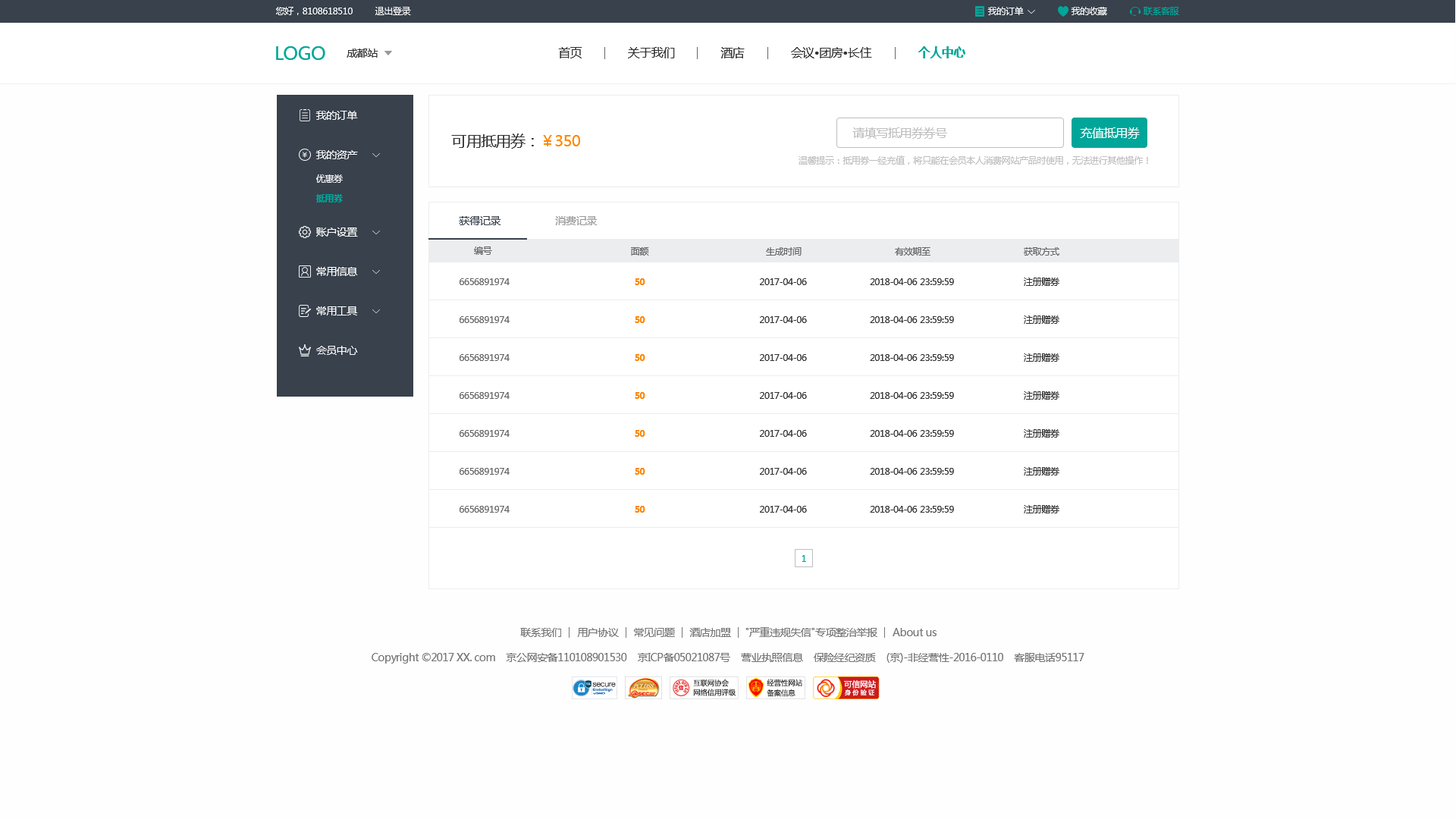
<style>
.page{position:relative;width:1456px;height:819px;background:#fefefe}
.page>*{position:absolute;margin:0}
.t1{font:9.1px "MicrosoftYaHei";letter-spacing:-0.03em;color:#ffffff}
.t2{font:9.1px "MicrosoftYaHei";letter-spacing:-0.03em;color:#00a699}
.t3{font:18.2px "MicrosoftYaHei";letter-spacing:-0.03em;color:#00a699}
.t4{font:10.6px "MicrosoftYaHei";letter-spacing:-0.03em;color:#333333}
.t5{font:12.1px "MicrosoftYaHei";letter-spacing:-0.03em;color:#333333}
.t6{font:12.1px "MicrosoftYaHei-Bold";letter-spacing:-0.03em;color:#00a699}
.t7{font:10.6px "MicrosoftYaHei";letter-spacing:-0.03em;color:#ffffff}
.t8{font:15.2px "MicrosoftYaHei";letter-spacing:-0.03em;color:#333333}
.t9{font:15.2px "MicrosoftYaHei";letter-spacing:-0.03em;color:#ff8800}
.t10{font:12.1px "MicrosoftYaHei";letter-spacing:-0.03em;color:#bfbfbf}
.t11{font:12.1px "MicrosoftYaHei";letter-spacing:-0.03em;color:#ffffff}
.t12{font:9.1px "MicrosoftYaHei";letter-spacing:-0.03em;color:#bfbfbf}
.t13{font:9.1px "MicrosoftYaHei-Bold";letter-spacing:-0.03em;color:#00a699}
.t14{font:10.6px "MicrosoftYaHei";letter-spacing:-0.03em;color:#38414c}
.t15{font:10.6px "MicrosoftYaHei";letter-spacing:-0.03em;color:#999999}
.t16{font:9.1px "MicrosoftYaHei";letter-spacing:-0.03em;color:#666666}
.t17{font:9.1px "MicrosoftYaHei-Bold";letter-spacing:-0.03em;color:#ff8800}
.t18{font:9.1px "MicrosoftYaHei";letter-spacing:-0.03em;color:#333333}
.t19{font:10.6px "MicrosoftYaHei";letter-spacing:-0.03em;color:#777777}
</style>
<div class="page">
<p class="t1" style="left:276px;top:7px;width:77px;height:8px">您好，8108618510</p>
<p class="t1" style="left:375px;top:7px;width:36px;height:8px">退出登录</p>
<p class="t1" style="left:987px;top:7px;width:37px;height:8px">我的订单</p>
<p class="t1" style="left:1071px;top:7px;width:36px;height:8px">我的收藏</p>
<p class="t2" style="left:1144px;top:7px;width:35px;height:8px">联系客服</p>
<p class="t3" style="left:276px;top:46px;width:49px;height:14px">LOGO</p>
<p class="t4" style="left:347px;top:49px;width:31px;height:9px">成都站</p>
<p class="t5" style="left:558px;top:47px;width:24px;height:11px">首页</p>
<p class="t5" style="left:628px;top:47px;width:47px;height:11px">关于我们</p>
<p class="t5" style="left:720px;top:47px;width:25px;height:11px">酒店</p>
<p class="t5" style="left:791px;top:47px;width:81px;height:11px">会议•团房•长住</p>
<p class="t6" style="left:918px;top:46px;width:47px;height:12px">个人中心</p>
<p class="t7" style="left:315px;top:111px;width:43px;height:9px">我的订单</p>
<p class="t8" style="left:451px;top:133px;width:129px;height:16px">可用抵用券：<span class="t9">￥350</span></p>
<p class="t10" style="left:852px;top:127px;width:95px;height:12px">请填写抵用券券号</p>
<p class="t11" style="left:1080px;top:127px;width:60px;height:12px">充值抵用券</p>
<p class="t7" style="left:315px;top:150px;width:43px;height:9px">我的资产</p>
<p class="t12" style="left:799px;top:155px;width:349px;height:10px">温馨提示：抵用券一经充值，将只能在会员本人消费网站产品时使用，无法进行其他操作！</p>
<p class="t1" style="left:316px;top:174px;width:27px;height:9px">优惠券</p>
<p class="t13" style="left:315px;top:194px;width:28px;height:8px">抵用券</p>
<p class="t14" style="left:459px;top:216px;width:42px;height:9px">获得记录</p>
<p class="t15" style="left:555px;top:216px;width:43px;height:9px">消费记录</p>
<p class="t7" style="left:316px;top:227px;width:42px;height:10px">账户设置</p>
<p class="t16" style="left:474px;top:246px;width:18px;height:9px">编号</p>
<p class="t16" style="left:631px;top:247px;width:18px;height:9px">面额</p>
<p class="t16" style="left:766px;top:247px;width:36px;height:9px">生成时间</p>
<p class="t16" style="left:895px;top:247px;width:35px;height:9px">有效期至</p>
<p class="t16" style="left:1024px;top:247px;width:35px;height:9px">获取方式</p>
<p class="t7" style="left:316px;top:267px;width:42px;height:9px">常用信息</p>
<p class="t16" style="left:460px;top:278px;width:50px;height:7px">6656891974</p>
<p class="t17" style="left:635px;top:278px;width:10px;height:7px">50</p>
<p class="t18" style="left:760px;top:278px;width:47px;height:7px">2017-04-06</p>
<p class="t18" style="left:870px;top:278px;width:84px;height:7px">2018-04-06 23:59:59</p>
<p class="t18" style="left:1024px;top:278px;width:35px;height:8px">注册赠券</p>
<p class="t7" style="left:316px;top:306px;width:42px;height:9px">常用工具</p>
<p class="t16" style="left:460px;top:316px;width:50px;height:7px">6656891974</p>
<p class="t17" style="left:635px;top:316px;width:10px;height:7px">50</p>
<p class="t18" style="left:760px;top:316px;width:47px;height:7px">2017-04-06</p>
<p class="t18" style="left:870px;top:316px;width:84px;height:7px">2018-04-06 23:59:59</p>
<p class="t18" style="left:1024px;top:315px;width:35px;height:9px">注册赠券</p>
<p class="t7" style="left:316px;top:346px;width:42px;height:9px">会员中心</p>
<p class="t18" style="left:1024px;top:353px;width:35px;height:9px">注册赠券</p>
<p class="t16" style="left:460px;top:354px;width:50px;height:7px">6656891974</p>
<p class="t17" style="left:635px;top:354px;width:10px;height:7px">50</p>
<p class="t18" style="left:760px;top:354px;width:47px;height:7px">2017-04-06</p>
<p class="t18" style="left:870px;top:354px;width:84px;height:7px">2018-04-06 23:59:59</p>
<p class="t16" style="left:460px;top:392px;width:50px;height:7px">6656891974</p>
<p class="t17" style="left:635px;top:392px;width:10px;height:7px">50</p>
<p class="t18" style="left:760px;top:392px;width:47px;height:7px">2017-04-06</p>
<p class="t18" style="left:870px;top:392px;width:84px;height:7px">2018-04-06 23:59:59</p>
<p class="t18" style="left:1024px;top:391px;width:35px;height:9px">注册赠券</p>
<p class="t16" style="left:460px;top:430px;width:50px;height:7px">6656891974</p>
<p class="t17" style="left:635px;top:430px;width:10px;height:7px">50</p>
<p class="t18" style="left:760px;top:430px;width:47px;height:7px">2017-04-06</p>
<p class="t18" style="left:870px;top:430px;width:84px;height:7px">2018-04-06 23:59:59</p>
<p class="t18" style="left:1024px;top:429px;width:35px;height:9px">注册赠券</p>
<p class="t16" style="left:460px;top:468px;width:50px;height:7px">6656891974</p>
<p class="t17" style="left:635px;top:468px;width:10px;height:7px">50</p>
<p class="t18" style="left:760px;top:468px;width:47px;height:7px">2017-04-06</p>
<p class="t18" style="left:870px;top:468px;width:84px;height:7px">2018-04-06 23:59:59</p>
<p class="t18" style="left:1024px;top:467px;width:35px;height:8px">注册赠券</p>
<p class="t16" style="left:460px;top:506px;width:50px;height:7px">6656891974</p>
<p class="t17" style="left:635px;top:506px;width:10px;height:7px">50</p>
<p class="t18" style="left:760px;top:506px;width:47px;height:7px">2017-04-06</p>
<p class="t18" style="left:870px;top:506px;width:84px;height:7px">2018-04-06 23:59:59</p>
<p class="t18" style="left:1024px;top:505px;width:35px;height:8px">注册赠券</p>
<p class="t2" style="left:802px;top:555px;width:4px;height:7px">1</p>
<p class="t19" style="left:520px;top:628px;width:41px;height:9px">联系我们</p>
<p class="t19" style="left:577px;top:628px;width:42px;height:9px">用户协议</p>
<p class="t19" style="left:634px;top:628px;width:41px;height:9px">常见问题</p>
<p class="t19" style="left:689px;top:628px;width:42px;height:9px">酒店加盟</p>
<p class="t19" style="left:745px;top:627px;width:132px;height:10px">"严重违规失信"专项整治举报</p>
<p class="t19" style="left:893px;top:628px;width:44px;height:8px">About us</p>
<p class="t19" style="left:372px;top:653px;width:712px;height:11px">Copyright ©2017 XX. com    京公网安备110108901530    京ICP备05021087号    营业执照信息    保险经纪资质    (京)-非经营性-2016-0110    客服电话95117</p>
</div>
